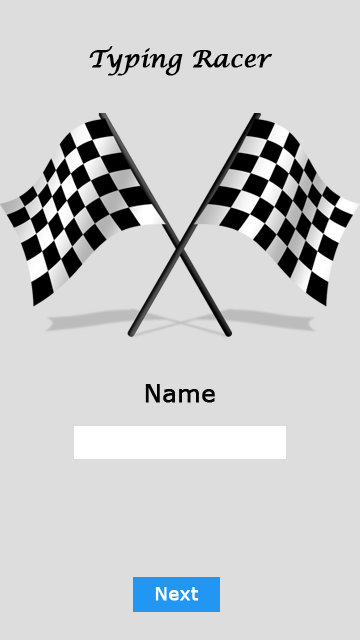
<style>
.page{position:relative;width:360px;height:640px;background:#dddddd}
.page>*{position:absolute;margin:0}
.t1{font:24px "LucidaCalligraphy-Italic";color:#000000;font-weight:bold}
.t2{font:24px "Verdana";color:#000000;font-weight:bold}
.t3{font:18px "Verdana";color:#ffffff;font-weight:bold}
</style>
<div class="page">
<p class="t1" style="left:89px;top:46px;width:183px;height:30px">Typing Racer</p>
<p class="t2" style="left:145px;top:384px;width:70px;height:19px">Name</p>
<p class="t3" style="left:155px;top:587px;width:44px;height:14px">Next</p>
</div>
